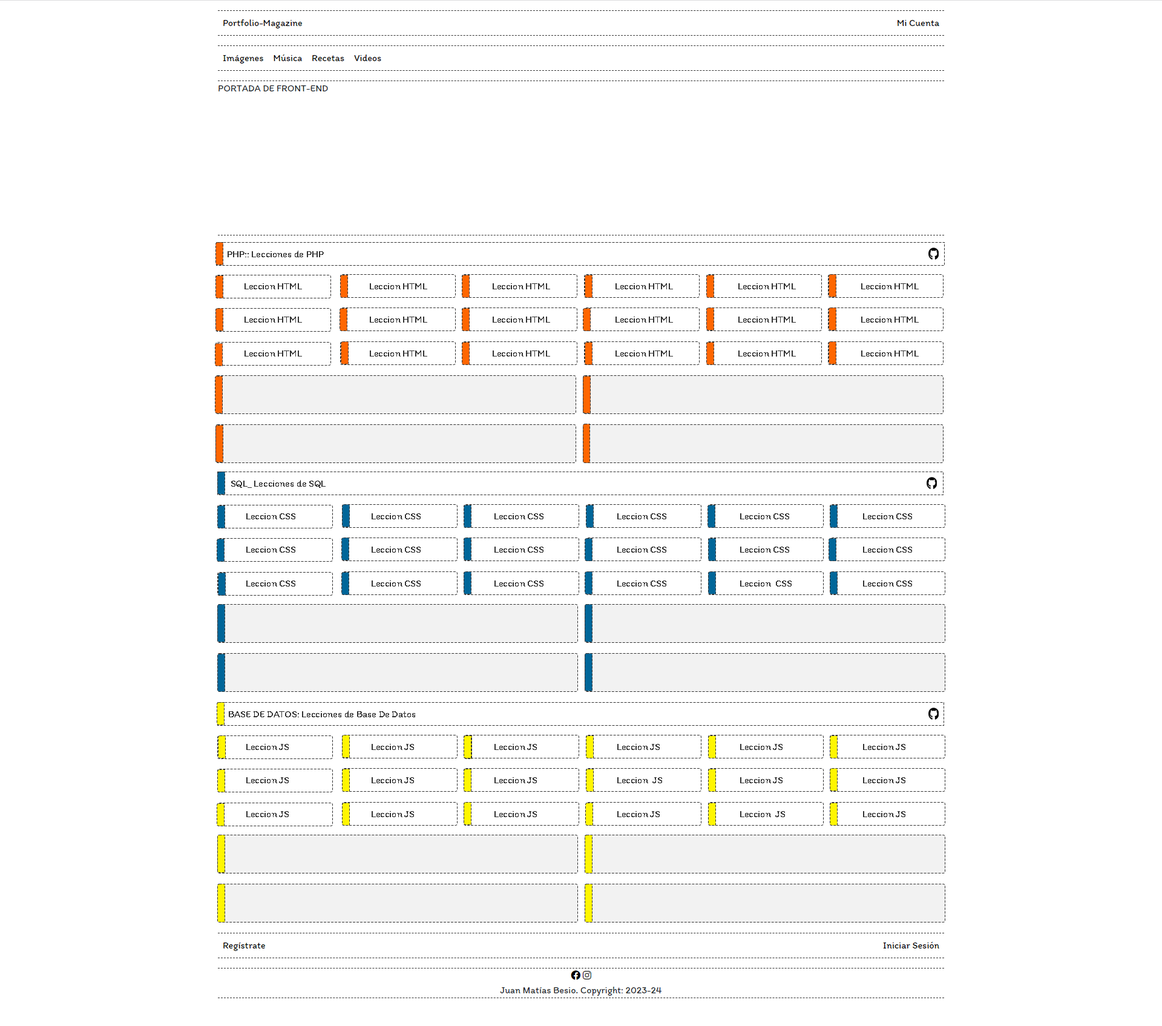
<style>
.page{position:relative;width:1162px;height:1026px;background:#ffffff}
.page>*{position:absolute;margin:0}
.t1{font:9.7px "Itim-Regular";color:#333333}
</style>
<div class="page">
<p class="t1" style="left:228px;top:251px;width:96px;height:6px">PHP:: Lecciones de PHP</p>
<p class="t1" style="left:245px;top:283px;width:57px;height:6px">Leccion HTML</p>
<p class="t1" style="left:370px;top:283px;width:57px;height:6px">Leccion HTML</p>
<p class="t1" style="left:493px;top:283px;width:57px;height:6px">Leccion HTML</p>
<p class="t1" style="left:616px;top:283px;width:57px;height:6px">Leccion HTML</p>
<p class="t1" style="left:738px;top:283px;width:58px;height:6px">Leccion HTML</p>
<p class="t1" style="left:861px;top:283px;width:58px;height:6px">Leccion HTML</p>
<p class="t1" style="left:245px;top:317px;width:57px;height:6px">Leccion HTML</p>
<p class="t1" style="left:370px;top:317px;width:57px;height:6px">Leccion HTML</p>
<p class="t1" style="left:493px;top:317px;width:57px;height:6px">Leccion HTML</p>
<p class="t1" style="left:616px;top:317px;width:57px;height:6px">Leccion HTML</p>
<p class="t1" style="left:738px;top:317px;width:58px;height:6px">Leccion HTML</p>
<p class="t1" style="left:861px;top:317px;width:58px;height:6px">Leccion HTML</p>
<p class="t1" style="left:245px;top:350px;width:57px;height:7px">Leccion HTML</p>
<p class="t1" style="left:370px;top:350px;width:57px;height:7px">Leccion HTML</p>
<p class="t1" style="left:493px;top:350px;width:57px;height:7px">Leccion HTML</p>
<p class="t1" style="left:616px;top:350px;width:57px;height:7px">Leccion HTML</p>
<p class="t1" style="left:738px;top:350px;width:58px;height:7px">Leccion HTML</p>
<p class="t1" style="left:861px;top:350px;width:58px;height:7px">Leccion HTML</p>
<p class="t1" style="left:231px;top:480px;width:95px;height:8px">SQL_ Lecciones de SQL</p>
<p class="t1" style="left:246px;top:513px;width:49px;height:6px">Leccion CSS</p>
<p class="t1" style="left:372px;top:513px;width:49px;height:6px">Leccion CSS</p>
<p class="t1" style="left:495px;top:513px;width:49px;height:6px">Leccion CSS</p>
<p class="t1" style="left:617px;top:513px;width:49px;height:6px">Leccion CSS</p>
<p class="t1" style="left:740px;top:513px;width:49px;height:6px">Leccion CSS</p>
<p class="t1" style="left:863px;top:513px;width:49px;height:6px">Leccion CSS</p>
<p class="t1" style="left:246px;top:547px;width:49px;height:6px">Leccion CSS</p>
<p class="t1" style="left:372px;top:547px;width:49px;height:6px">Leccion CSS</p>
<p class="t1" style="left:495px;top:547px;width:49px;height:6px">Leccion CSS</p>
<p class="t1" style="left:617px;top:547px;width:49px;height:6px">Leccion CSS</p>
<p class="t1" style="left:740px;top:547px;width:49px;height:6px">Leccion CSS</p>
<p class="t1" style="left:863px;top:547px;width:49px;height:6px">Leccion CSS</p>
<p class="t1" style="left:246px;top:580px;width:49px;height:7px">Leccion CSS</p>
<p class="t1" style="left:372px;top:580px;width:49px;height:7px">Leccion CSS</p>
<p class="t1" style="left:495px;top:580px;width:49px;height:7px">Leccion CSS</p>
<p class="t1" style="left:617px;top:580px;width:49px;height:7px">Leccion CSS</p>
<p class="t1" style="left:740px;top:580px;width:52px;height:7px">Leccion  CSS</p>
<p class="t1" style="left:863px;top:580px;width:49px;height:7px">Leccion CSS</p>
<p class="t1" style="left:229px;top:711px;width:186px;height:6px">BASE DE DATOS: Lecciones de Base De Datos</p>
<p class="t1" style="left:246px;top:744px;width:43px;height:6px">Leccion JS</p>
<p class="t1" style="left:372px;top:744px;width:42px;height:6px">Leccion JS</p>
<p class="t1" style="left:495px;top:744px;width:42px;height:6px">Leccion JS</p>
<p class="t1" style="left:617px;top:744px;width:43px;height:6px">Leccion JS</p>
<p class="t1" style="left:740px;top:744px;width:43px;height:6px">Leccion JS</p>
<p class="t1" style="left:863px;top:744px;width:43px;height:6px">Leccion JS</p>
<p class="t1" style="left:246px;top:777px;width:43px;height:6px">Leccion JS</p>
<p class="t1" style="left:372px;top:777px;width:42px;height:6px">Leccion JS</p>
<p class="t1" style="left:495px;top:777px;width:42px;height:6px">Leccion JS</p>
<p class="t1" style="left:617px;top:777px;width:45px;height:6px">Leccion  JS</p>
<p class="t1" style="left:740px;top:777px;width:43px;height:6px">Leccion JS</p>
<p class="t1" style="left:863px;top:777px;width:43px;height:6px">Leccion JS</p>
<p class="t1" style="left:246px;top:811px;width:43px;height:6px">Leccion JS</p>
<p class="t1" style="left:372px;top:811px;width:42px;height:6px">Leccion JS</p>
<p class="t1" style="left:495px;top:811px;width:42px;height:6px">Leccion JS</p>
<p class="t1" style="left:617px;top:811px;width:43px;height:6px">Leccion JS</p>
<p class="t1" style="left:740px;top:811px;width:45px;height:6px">Leccion  JS</p>
<p class="t1" style="left:863px;top:811px;width:43px;height:6px">Leccion JS</p>
</div>
